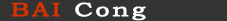
<style>
.page{position:relative;width:227px;height:21px;background:#333333}
.page>*{position:absolute;margin:0}
.t1{font:19.3px "STZhongsong";letter-spacing:0.1em;color:#ffffff;font-weight:bold;scale:1.27 1}
.t2{font:19.3px "AdobeHeitiStd-Regular";color:#d73300;scale:1.27 1}
.t3{font:19.3px "STZhongsong";letter-spacing:0.1em;color:#d73300;font-weight:bold;scale:1.27 1}
</style>
<div class="page">
<p class="t1" style="left:11px;top:2px;width:135px;height:19px"><span class="t2">  </span><span class="t3">BAI </span>Cong</p>
</div>
